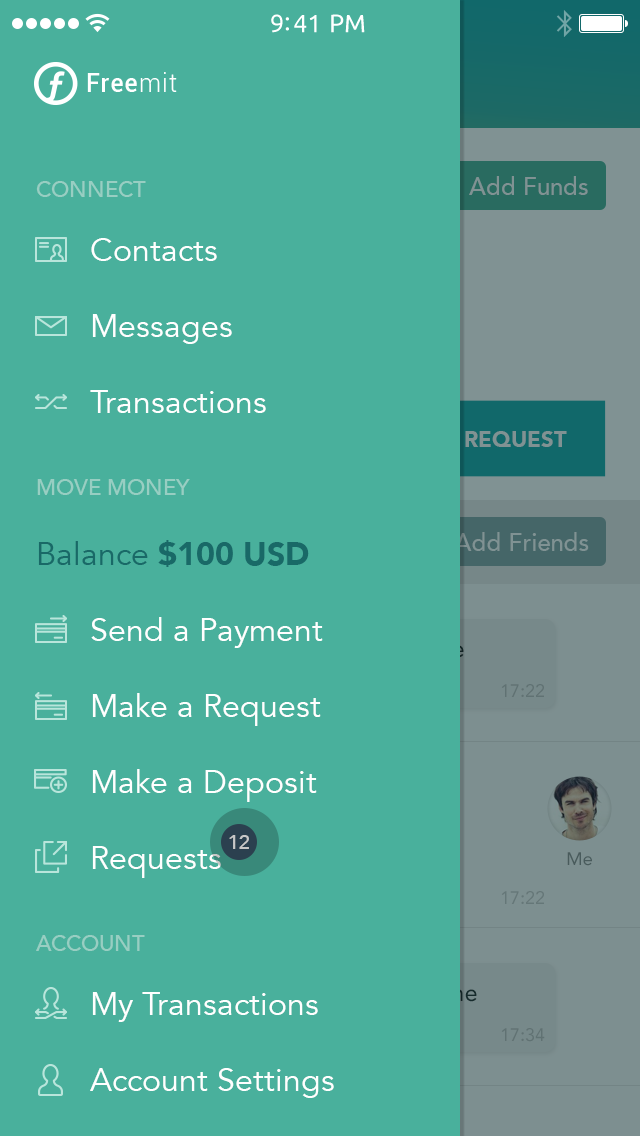
<style>
.page{position:relative;width:640px;height:1136px;background:#49b09c}
.page>*{position:absolute;margin:0}
.t1{font:22px "Avenir-Medium";color:#98cec2;text-transform:uppercase}
.t2{font:32px/76px "Avenir-Book";color:#ffffff}
.t3{font:32px "Avenir-Black";color:#1a6966}
.t4{font:32px "Avenir-Book";color:#196967}
.t5{font:20px "Avenir-Medium";color:#c7c7c7}
</style>
<div class="page">
<p class="t1" style="left:36px;top:181px;width:110px;height:16px">Connect</p>
<p class="t2" style="left:90px;top:238px;width:176px;height:175px">Contacts<br>Messages<br>Transactions</p>
<p class="t1" style="left:37px;top:479px;width:153px;height:16px">Move money</p>
<p class="t3" style="left:38px;top:540px;width:271px;height:27px"><span class="t4">Balance </span>$100 USD</p>
<p class="t2" style="left:91px;top:617px;width:232px;height:261px">Send a Payment<br>Make a Request<br>Make a Deposit<br>Requests</p>
<p class="t5" style="left:229px;top:835px;width:20px;height:14px">12</p>
<p class="t1" style="left:36px;top:935px;width:109px;height:16px">Account</p>
</div>
